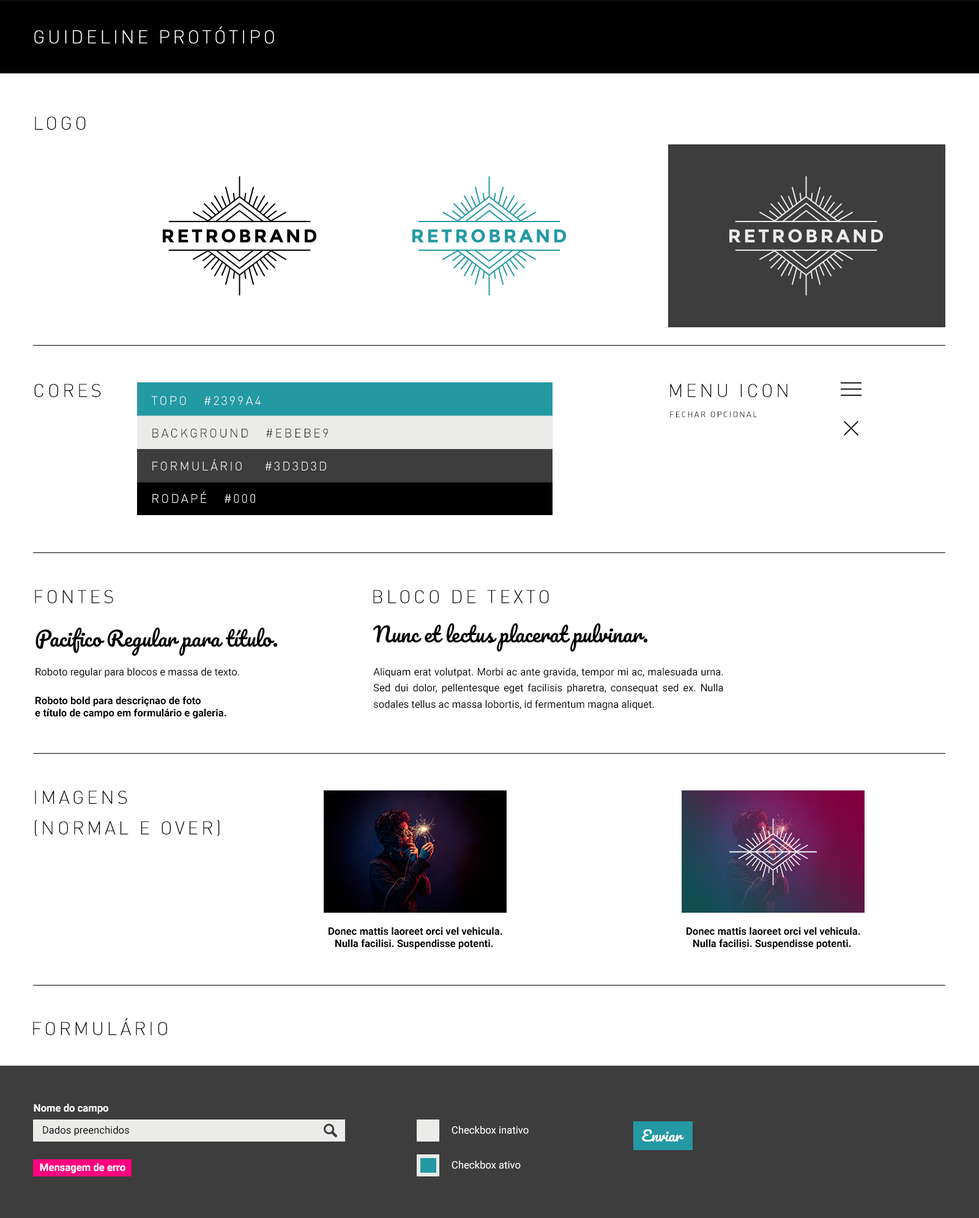
<style>
.page{position:relative;width:979px;height:1218px;background:#ffffff}
.page>*{position:absolute;margin:0}
.t1{font:18.4px "DIN-Light";letter-spacing:0.15em;color:#ffffff;text-transform:uppercase}
.t2{font:18.4px "DIN-Light";letter-spacing:0.15em;color:#000000;text-transform:uppercase}
.t3{font:8.2px "DIN-RegularAlternate";letter-spacing:0.15em;color:#000000;text-transform:uppercase}
.t4{font:10.2px/28.6px "Roboto-Regular";color:#000000}
.t5{font:20.4px/28.6px "Pacifico-Regular";color:#000000}
.t6{font:10.2px/28.6px "Roboto-Bold";color:#000000}
.t7{font:10.2px "Roboto-Bold";color:#000000}
.t8{font:10.2px/16.3px "Roboto-Regular";color:#000000}
.t9{font:20.4px/16.3px "Pacifico-Regular";color:#000000}
.t10{font:18.4px/30.6px "DIN-Light";letter-spacing:0.15em;color:#000000;text-transform:uppercase}
.t11{font:10.2px "Roboto-Bold";color:#ffffff}
.t12{font:10.2px "Roboto-Regular";color:#000000}
.t13{font:10.2px/34.7px "Roboto-Regular";color:#ffffff}
.t14{font:14.3px "Pacifico-Regular";color:#ffffff}
</style>
<div class="page">
<p class="t1" style="left:34px;top:26px;width:240px;height:18px">guideline protótipo</p>
<p class="t2" style="left:35px;top:116px;width:51px;height:14px">logo</p>
<p class="t2" style="left:34px;top:384px;width:67px;height:14px">cores</p>
<p class="t2" style="left:670px;top:384px;width:117px;height:14px">menu icon</p>
<p class="t3" style="left:670px;top:411px;width:87px;height:6px">Fechar opcional</p>
<p class="t2" style="left:35px;top:590px;width:78px;height:14px">fontes</p>
<p class="t2" style="left:373px;top:590px;width:176px;height:14px">bloco de texto</p>
<p class="t4" style="left:35px;top:627px;width:243px;height:92px;text-align:justify"><span class="t5">Pacifico Regular para título.</span><br>Roboto regular para blocos e massa de texto.<br><span class="t6">Roboto bold para descriçnao de foto<br></span><span class="t7">e título de campo em formulário e galeria.</span></p>
<p class="t8" style="left:373px;top:623px;width:350px;height:87px;text-align:justify"><span class="t9">Nunc et lectus placerat pulvinar.<br></span><br>Aliquam erat volutpat. Morbi ac ante gravida, tempor mi ac, malesuada urna. Sed dui dolor, pellentesque eget facilisis pharetra, consequat sed ex. Nulla sodales tellus ac massa lobortis, id fermentum magna aliquet.</p>
<p class="t10" style="left:35px;top:790px;width:185px;height:46px">imagens<br>(normal e over)</p>
<p class="t7" style="left:329px;top:927px;width:173px;height:23px;text-align:center">Donec mattis laoreet orci vel vehicula.<br>Nulla facilisi. Suspendisse potenti.</p>
<p class="t7" style="left:686px;top:927px;width:174px;height:23px;text-align:center">Donec mattis laoreet orci vel vehicula.<br>Nulla facilisi. Suspendisse potenti.</p>
<p class="t2" style="left:33px;top:1018px;width:134px;height:18px">formulário</p>
<p class="t11" style="left:34px;top:1104px;width:74px;height:10px">Nome do campo</p>
<p class="t12" style="left:43px;top:1126px;width:86px;height:10px">Dados preenchidos</p>
<p class="t13" style="left:452px;top:1126px;width:77px;height:43px;text-align:justify">Checkbox inativo<br>Checkbox ativo</p>
<p class="t14" style="left:642px;top:1129px;width:42px;height:13px">Enviar</p>
<p class="t11" style="left:40px;top:1163px;width:85px;height:10px">Mensagem de erro</p>
</div>
